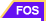
<style>
.page{position:relative;width:46px;height:21px;background:#6610f2}
.page>*{position:absolute;margin:0}
.t1{font:11px "ArialMT";letter-spacing:-0.01em;color:#ffffff;font-weight:bold}
</style>
<div class="page">
<p class="t1" style="left:16px;top:6px;width:23px;height:9px">FOS</p>
</div>
